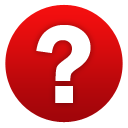
<style>
.page{position:relative;width:128px;height:128px;background:#ffffff}
.page>*{position:absolute;margin:0}
.t1{font:114.9px "FranklinGothic-Demi";color:#ffffff}
</style>
<div class="page">
<p class="t1" style="left:36px;top:25px;width:55px;height:78px">?</p>
</div>
